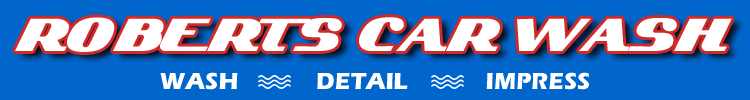
<style>
.page{position:relative;width:750px;height:100px;background:#0066cc}
.page>*{position:absolute;margin:0}
.t1{font:46px "KelvinizedNormal";color:#ffffff;scale:0.87 1}
.t2{font:24px "ErasITC-Bold";color:#ffffff}
</style>
<div class="page">
<p class="t1" style="left:15px;top:17px;width:717px;height:35px">ROBERTS CAR WASH</p>
<p class="t2" style="left:160px;top:72px;width:429px;height:18px">WASH             DETAIL             IMPRESS</p>
</div>
